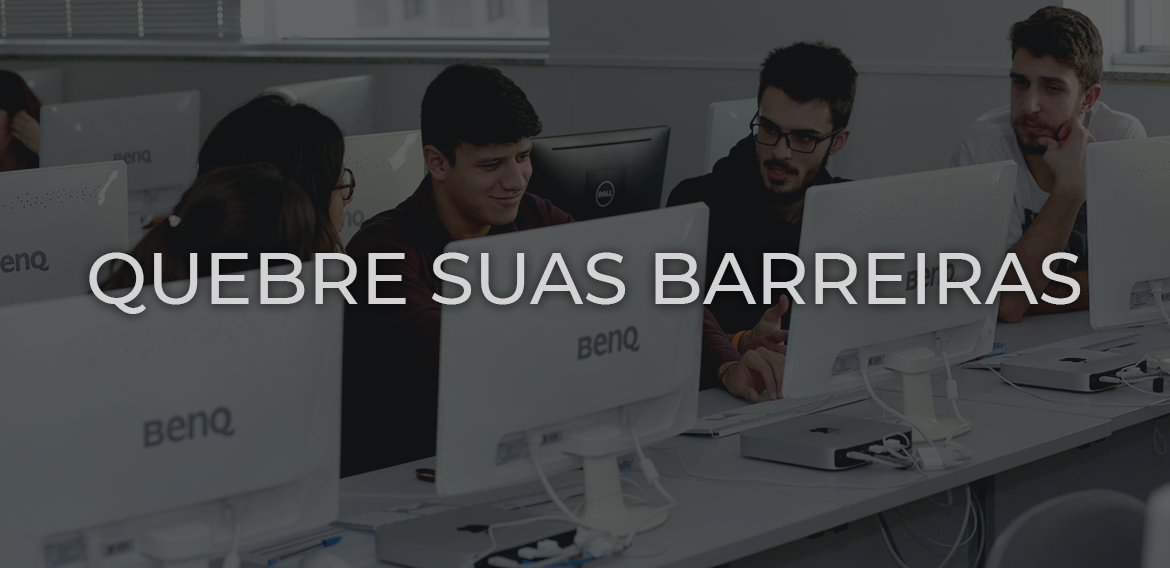
<style>
.page{position:relative;width:1170px;height:568px}
.page>*{position:absolute;margin:0}
.t1{font:72.5px "Montserrat-Medium";color:#d3d3d3}
</style>
<div class="page">
<p class="t1" style="left:89px;top:252px;width:992px;height:62px">QUEBRE SUAS BARREIRAS</p>
</div>
